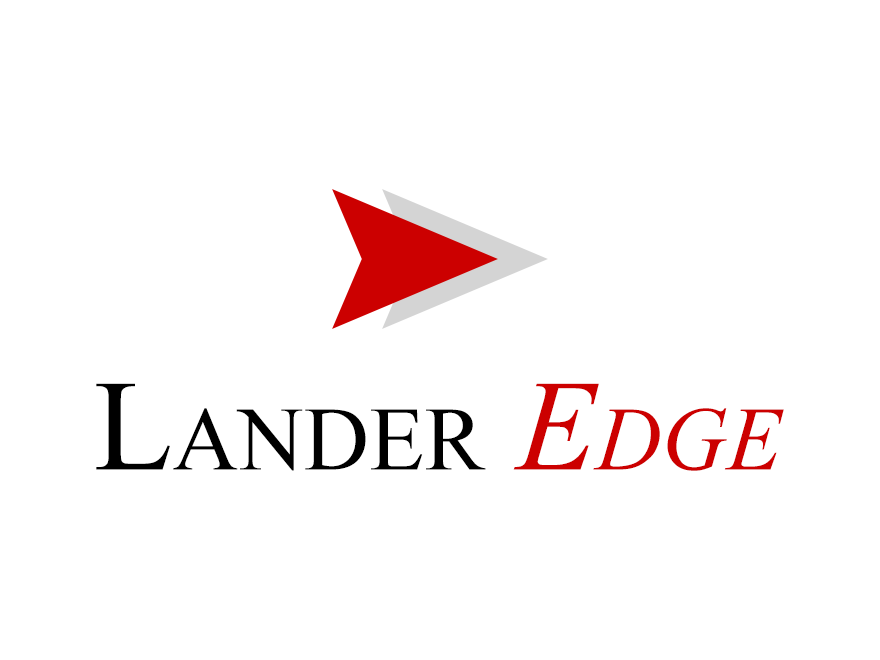
<style>
.page{position:relative;width:880px;height:660px;background:#ffffff}
.page>*{position:absolute;margin:0}
.t1{font:129.3px "TimesNewRomanPSMT";color:#000000;font-variant:small-caps}
.t2{font:129.3px "TimesNewRomanPS-ItalicMT";color:#cc0000;font-variant:small-caps}
</style>
<div class="page">
<p class="t1" style="left:96px;top:383px;width:688px;height:88px">Lander <span class="t2">Edge</span></p>
</div>
